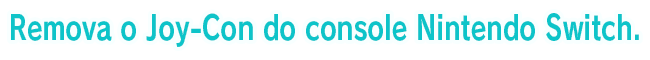
<style>
.page{position:relative;width:650px;height:60px;background:#ffffff}
.page>*{position:absolute;margin:0}
.t1{font:33.3px "RodinPro-B";color:#0dc4c9;scale:0.77 1}
</style>
<div class="page">
<p class="t1" style="left:11px;top:13px;width:628px;height:34px">Remova o Joy-Con do console Nintendo Switch.</p>
</div>
